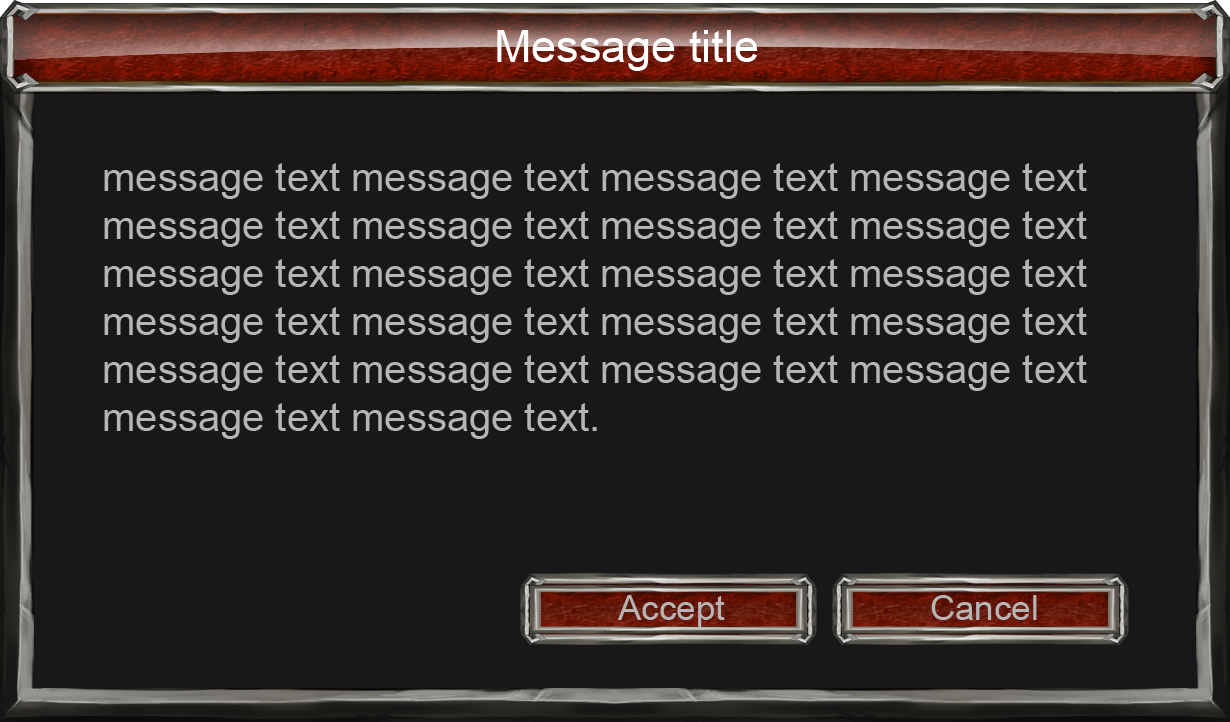
<style>
.page{position:relative;width:1230px;height:722px;background:#181818}
.page>*{position:absolute;margin:0}
.t1{font:45px "ArialMT";color:#ffffff}
.t2{font:40px "ArialMT";color:#b5b5b5}
.t3{font:35px "ArialMT";color:#b5b5b5}
</style>
<div class="page">
<p class="t1" style="left:497px;top:30px;width:261px;height:41px">Message title</p>
<p class="t2" style="left:104px;top:163px;width:983px;height:276px">message text message text message text message text message text message text message text message text message text message text message text message text message text message text message text message text message text message text message text message text message text message text.</p>
<p class="t3" style="left:617px;top:595px;width:108px;height:32px">Accept</p>
<p class="t3" style="left:931px;top:595px;width:106px;height:25px">Cancel</p>
</div>
